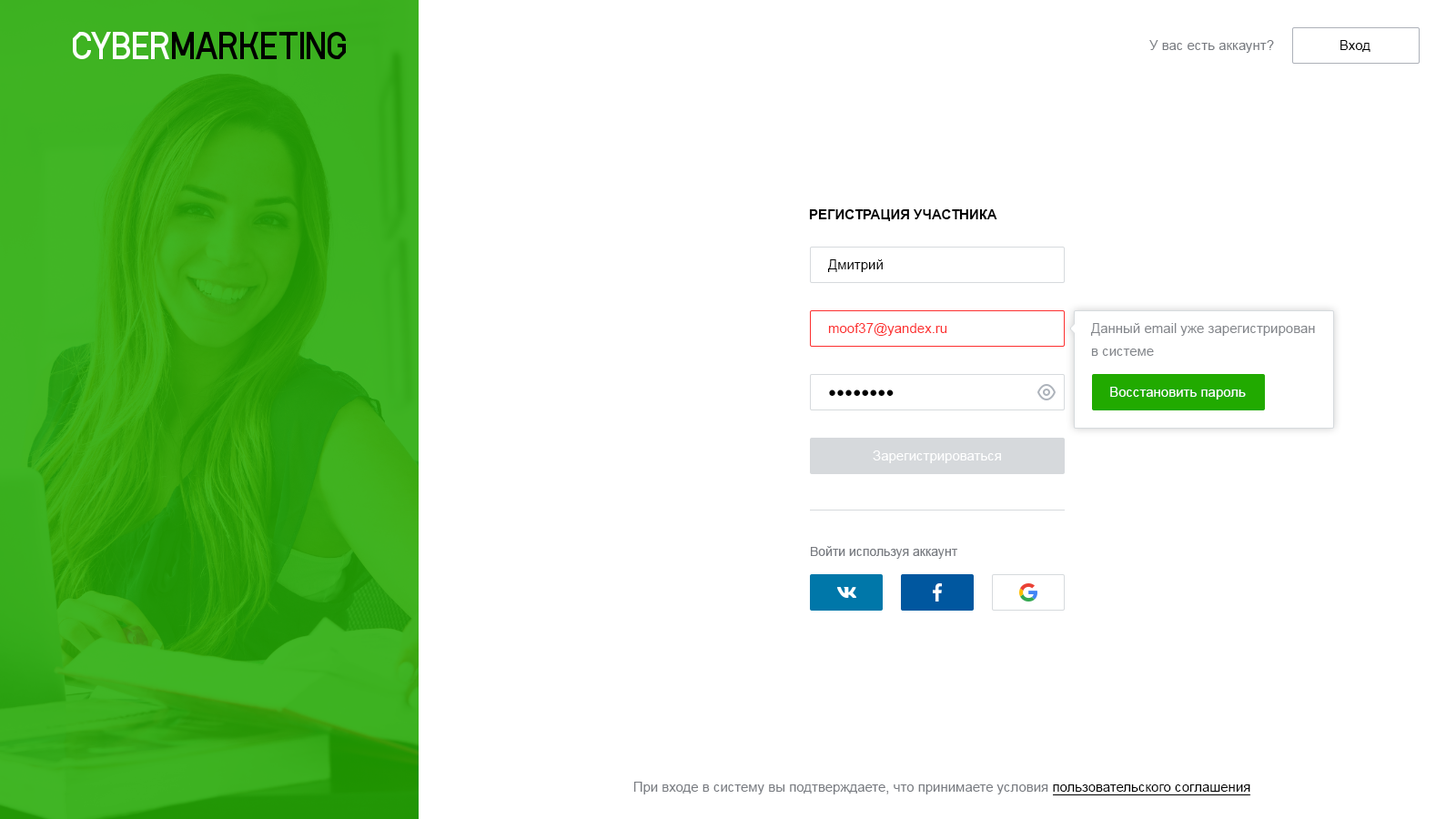
<style>
.page{position:relative;width:1456px;height:819px;background:#ffffff}
.page>*{position:absolute;margin:0}
.t1{font:13.6px "ArialMT";color:#787b81}
.t2{font:13.6px "ArialMT";color:#000000}
.t3{font:13.6px "Arial-BoldMT";color:#000000;text-transform:uppercase}
.t4{font:13.6px "ArialMT";color:#fc2f2f}
.t5{font:13.6px/22.7px "ArialMT";color:#83868b}
.t6{font:13.6px "ArialMT";color:#ffffff}
.t7{font:12.7px "ArialMT";color:#787b81}
</style>
<div class="page">
<p class="t1" style="left:1149px;top:40px;width:125px;height:13px">У вас есть аккаунт?</p>
<p class="t2" style="left:1340px;top:40px;width:30px;height:12px">Вход</p>
<p class="t3" style="left:809px;top:209px;width:188px;height:12px">Регистрация участника</p>
<p class="t2" style="left:827px;top:259px;width:56px;height:13px">Дмитрий</p>
<p class="t4" style="left:828px;top:323px;width:119px;height:13px">moof37@yandex.ru</p>
<p class="t5" style="left:1090px;top:323px;width:225px;height:33px">Данный email уже зарегистрирован <br>в системе</p>
<p class="t2" style="left:829px;top:389px;width:65px;height:8px">●●●●●●●●</p>
<p class="t6" style="left:1110px;top:387px;width:136px;height:12px">Восстановить пароль</p>
<p class="t6" style="left:873px;top:450px;width:128px;height:13px">Зарегистрироваться</p>
<p class="t7" style="left:811px;top:546px;width:146px;height:13px">Войти используя аккаунт</p>
<p class="t1" style="left:633px;top:782px;width:617px;height:12px">При входе в систему вы подтверждаете, что принимаете условия <span class="t2">пользовательского соглашения</span></p>
</div>
